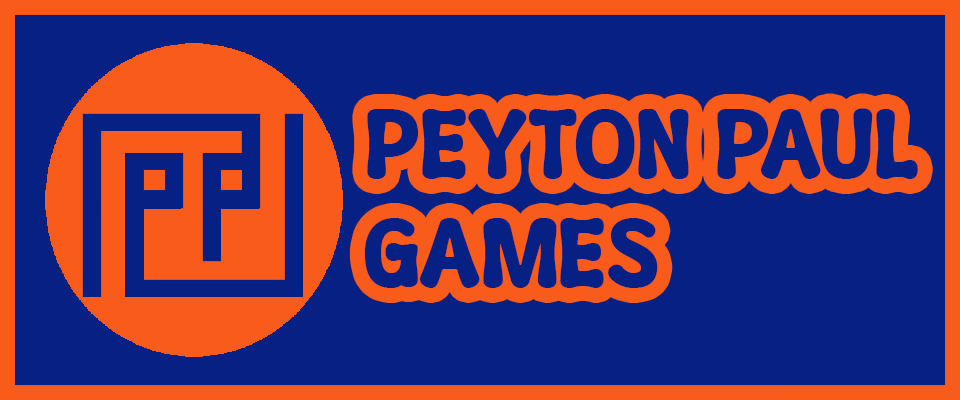
<style>
.page{position:relative;width:960px;height:400px;background:#072083}
.page>*{position:absolute;margin:0}
.t1{font:92.5px "MouldyCheese-Regular";color:#072083}
</style>
<div class="page">
<p class="t1" style="left:367px;top:108px;width:551px;height:71px">PEYTON PAUL</p>
<p class="t1" style="left:364px;top:218px;width:294px;height:70px">GAMES</p>
</div>
